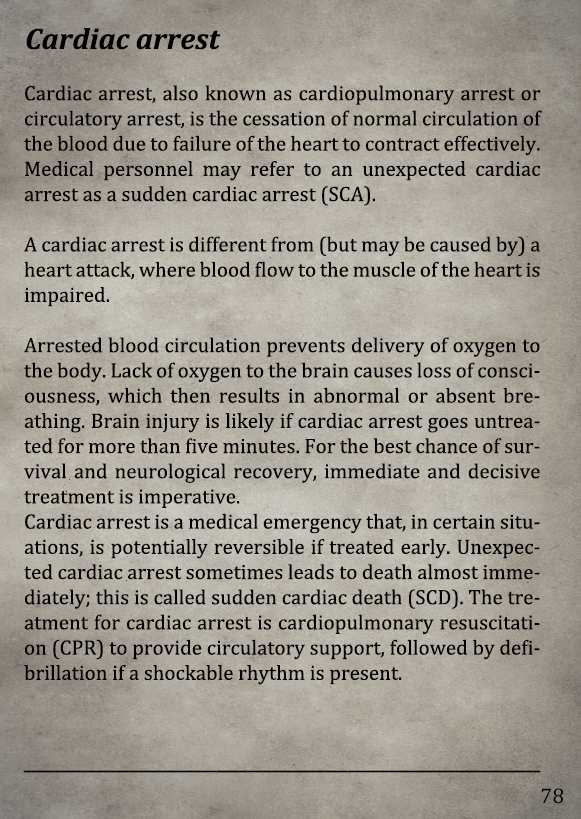
<style>
.page{position:relative;width:581px;height:819px}
.page>*{position:absolute;margin:0}
.t1{font:30px "Cambria-BoldItalic";color:#000000}
.t2{font:21px "Cambria";color:#000000}
.t3{font:21px "Arimo";color:#000000;scale:0.66 1}
.t4{font:21.5px "Cambria";color:#000000}
</style>
<div class="page">
<p class="t1" style="left:26px;top:28px;width:195px;height:22px">Cardiac arrest</p>
<p class="t2" style="left:24px;top:85px;width:518px;height:600px;text-align:justify">Cardiac arrest, also known as cardiopulmonary arrest or circulatory arrest, is the cessation of normal circulation of the blood due to failure of the heart to contract effectively. Medical personnel may refer to an unexpected cardiac arrest as a sudden cardiac arrest (SCA). <br><br>A cardiac arrest is different from (but may be caused by) a heart attack, where blood flow to the muscle of the heart is impaired. <br><br>Arrested blood circulation prevents delivery of oxygen to the body. Lack of oxygen to the brain causes loss of consciousness, which then results in abnormal or absent breathing. Brain injury is likely if cardiac arrest goes untreated for more than five minutes. For the best chance of survival and neurological recovery, immediate and decisive treatment is imperative. <br>Cardiac arrest is a medical emergency that, in certain situations, is potentially reversible if treated early. Unexpected cardiac arrest sometimes leads to death almost immediately; this is called sudden cardiac death (SCD). The treatment for cardiac arrest is cardiopulmonary resuscitation (CPR) to provide circulatory support, followed by defibrillation if a shockable rhythm is present.</p>
<p class="t3" style="left:23px;top:770px;width:518px;height:3px">___________________________________________________________________</p>
<p class="t4" style="left:541px;top:788px;width:22px;height:16px">78</p>
</div>
